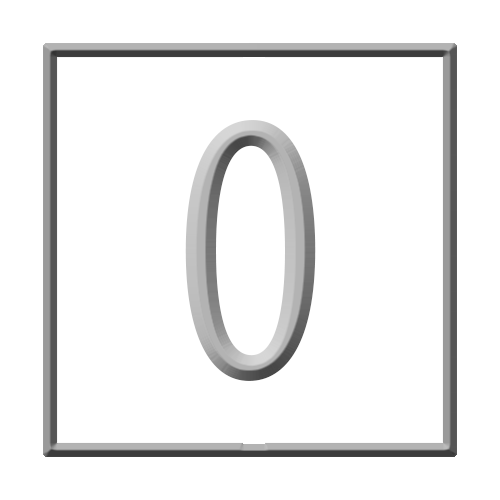
<style>
.page{position:relative;width:500px;height:500px;background:#ffffff}
.page>*{position:absolute;margin:0}
.t1{font:391.7px "MyriadPro-Cond";color:#b3b3b3}
</style>
<div class="page">
<p class="t1" style="left:185px;top:120px;width:131px;height:261px">0</p>
</div>
